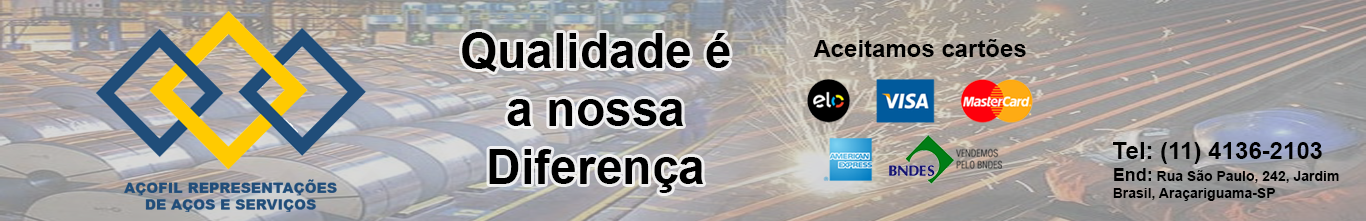
<style>
.page{position:relative;width:1366px;height:221px}
.page>*{position:absolute;margin:0}
.t1{font:48px "Arial-BoldMT";color:#000000}
.t2{font:24px "Arial-BoldMT";color:#000000}
.t3{font:14px "Arial-BoldMT";color:#000000}
.t4{font:18px "Arial-BoldMT";color:#000000}
</style>
<div class="page">
<p class="t1" style="left:462px;top:32px;width:268px;height:161px;text-align:center">Qualidade é<br>a nossa<br>Diferença</p>
<p class="t2" style="left:813px;top:39px;width:213px;height:18px">Aceitamos cartões</p>
<p class="t3" style="left:1113px;top:142px;width:226px;height:59px"><span class="t2">Tel: (11) 4136-2103<br></span><span class="t4">End:</span> Rua São Paulo, 242, Jardim Brasil, Araçariguama-SP</p>
</div>
